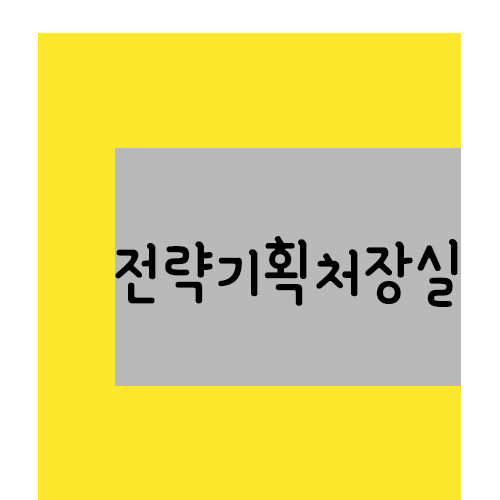
<style>
.page{position:relative;width:500px;height:500px;background:#fee82d}
.page>*{position:absolute;margin:0}
.t1{font:80px "YanoljaYacheR";color:#000000}
</style>
<div class="page">
<p class="t1" style="left:115px;top:236px;width:343px;height:71px">전략기획처장실</p>
</div>
